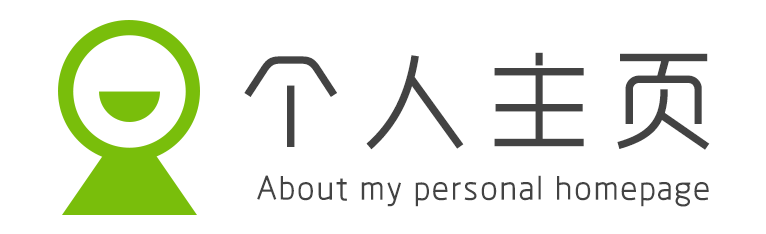
<style>
.page{position:relative;width:766px;height:234px;background:#ffffff}
.page>*{position:absolute;margin:0}
.t1{font:106.1px "MFYueHei_Noncommercial-Regular";letter-spacing:0.17em;color:#434343}
.t2{font:33.9px "MFYueHei_Noncommercial-Regular";letter-spacing:0.03em;color:#434343}
</style>
<div class="page">
<p class="t1" style="left:244px;top:52px;width:466px;height:98px">个人主页</p>
<p class="t2" style="left:257px;top:175px;width:452px;height:32px">About my personal homepage</p>
</div>
